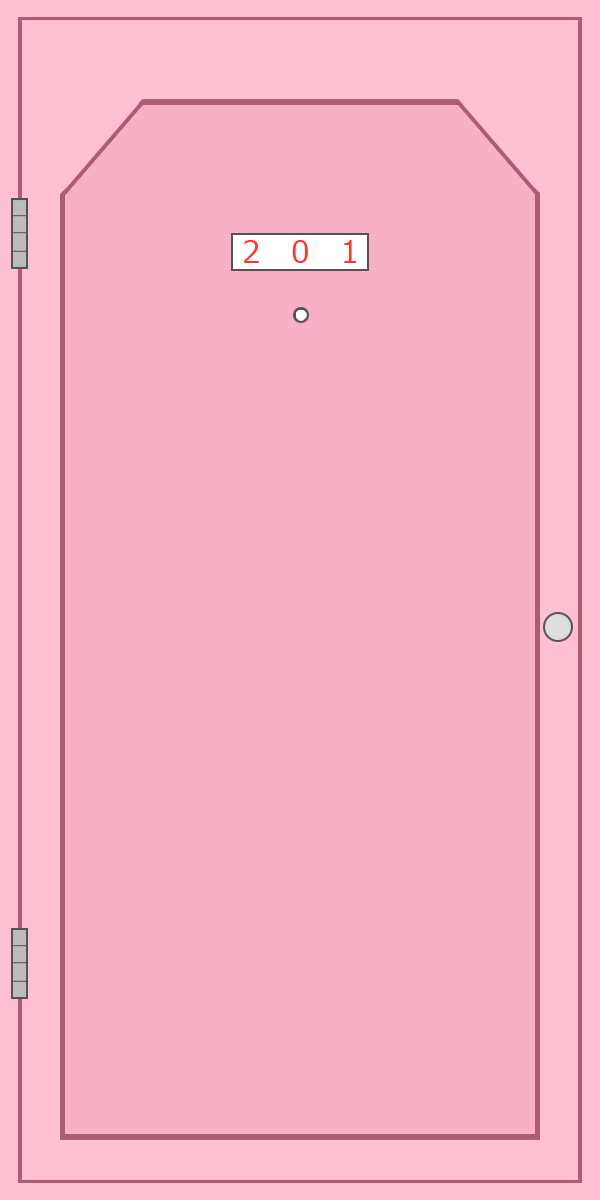
<style>
.page{position:relative;width:600px;height:1200px;background:#f8b0c6}
.page>*{position:absolute;margin:0}
.t1{font:30px "Meiryo";color:#ff362a}
</style>
<div class="page">
<p class="t1" style="left:244px;top:240px;width:113px;height:23px">2   0   1</p>
</div>
